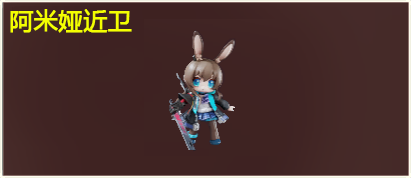
<style>
.page{position:relative;width:411px;height:178px}
.page>*{position:absolute;margin:0}
.t1{font:24px "MicrosoftYaHeiUI";color:#f4ff00;font-weight:bold}
</style>
<div class="page">
<p class="t1" style="left:10px;top:9px;width:122px;height:24px">阿米娅近卫</p>
</div>
